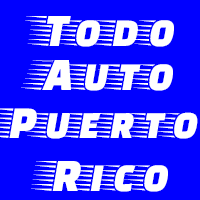
<style>
.page{position:relative;width:200px;height:200px;background:#0000ff}
.page>*{position:absolute;margin:0}
.t1{font:48px "FasterOne-Regular";color:#ffffff}
</style>
<div class="page">
<p class="t1" style="left:25px;top:16px;width:149px;height:31px">Todo</p>
<p class="t1" style="left:21px;top:60px;width:152px;height:31px">Auto</p>
<p class="t1" style="left:31px;top:161px;width:137px;height:31px">Rico</p>
</div>
